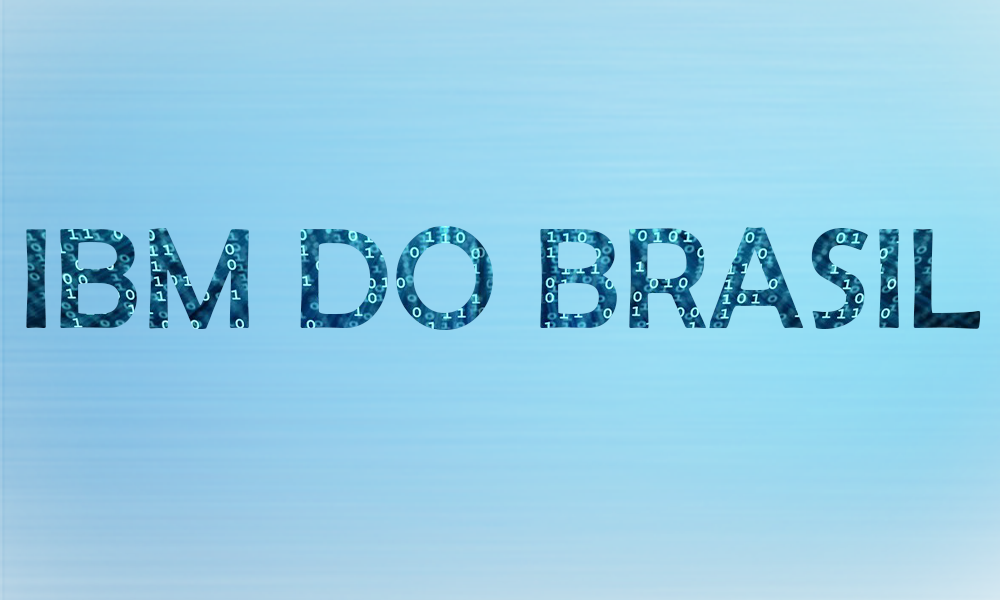
<style>
.page{position:relative;width:1000px;height:600px}
.page>*{position:absolute;margin:0}
.t1{font:145.1px "BerlinSansFB-Reg"}
</style>
<div class="page">
<p class="t1" style="left:26px;top:226px;width:955px;height:104px">IBM DO BRASIL</p>
</div>
